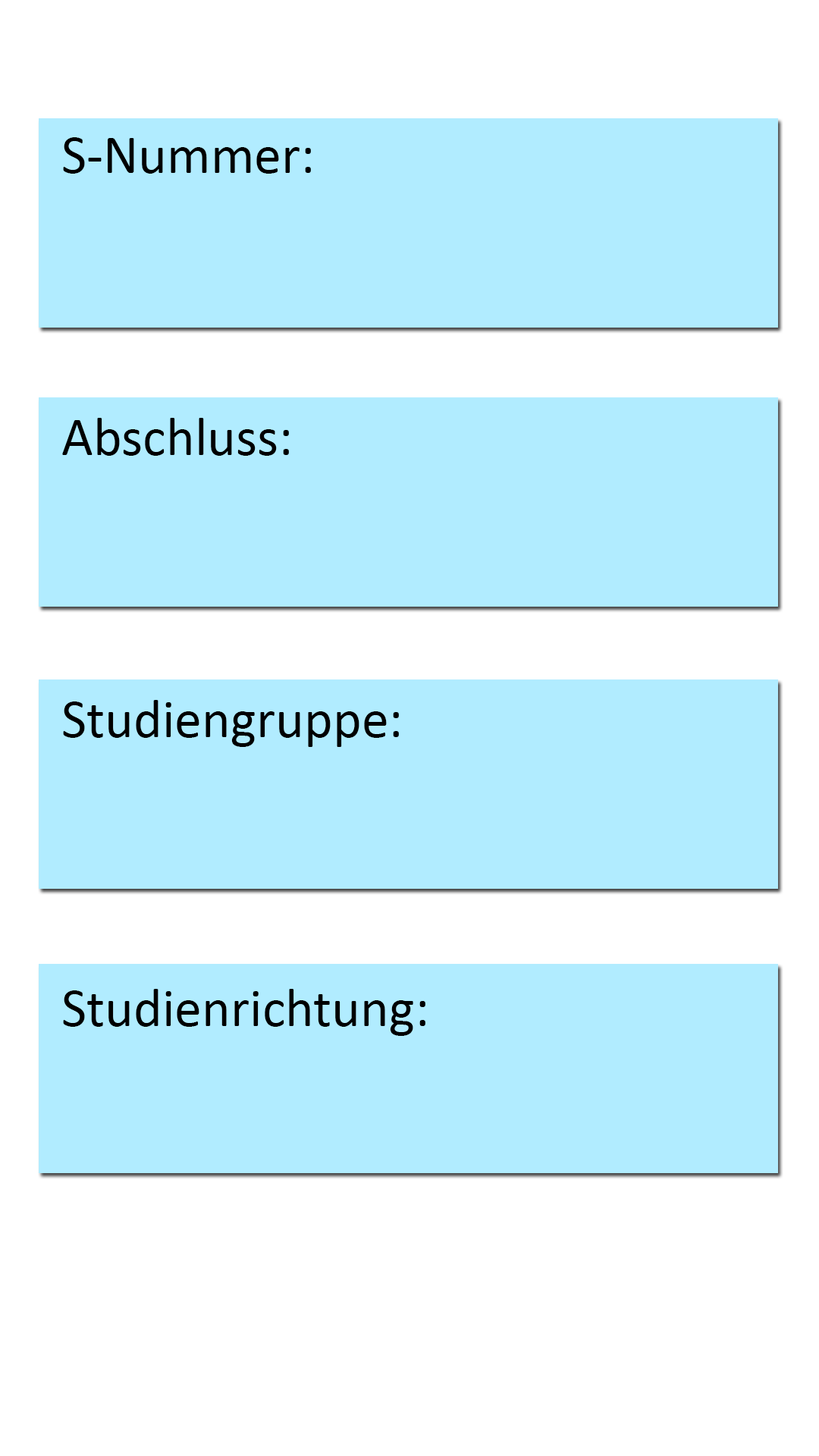
<style>
.page{position:relative;width:819px;height:1456px;background:#b1ecff}
.page>*{position:absolute;margin:0}
.t1{font:54.6px "Calibri";color:#000000}
</style>
<div class="page">
<p class="t1" style="left:63px;top:137px;width:248px;height:37px">S-Nummer:</p>
<p class="t1" style="left:62px;top:418px;width:227px;height:38px">Abschluss:</p>
<p class="t1" style="left:63px;top:700px;width:336px;height:47px">Studiengruppe:</p>
<p class="t1" style="left:63px;top:989px;width:362px;height:47px">Studienrichtung:</p>
</div>
